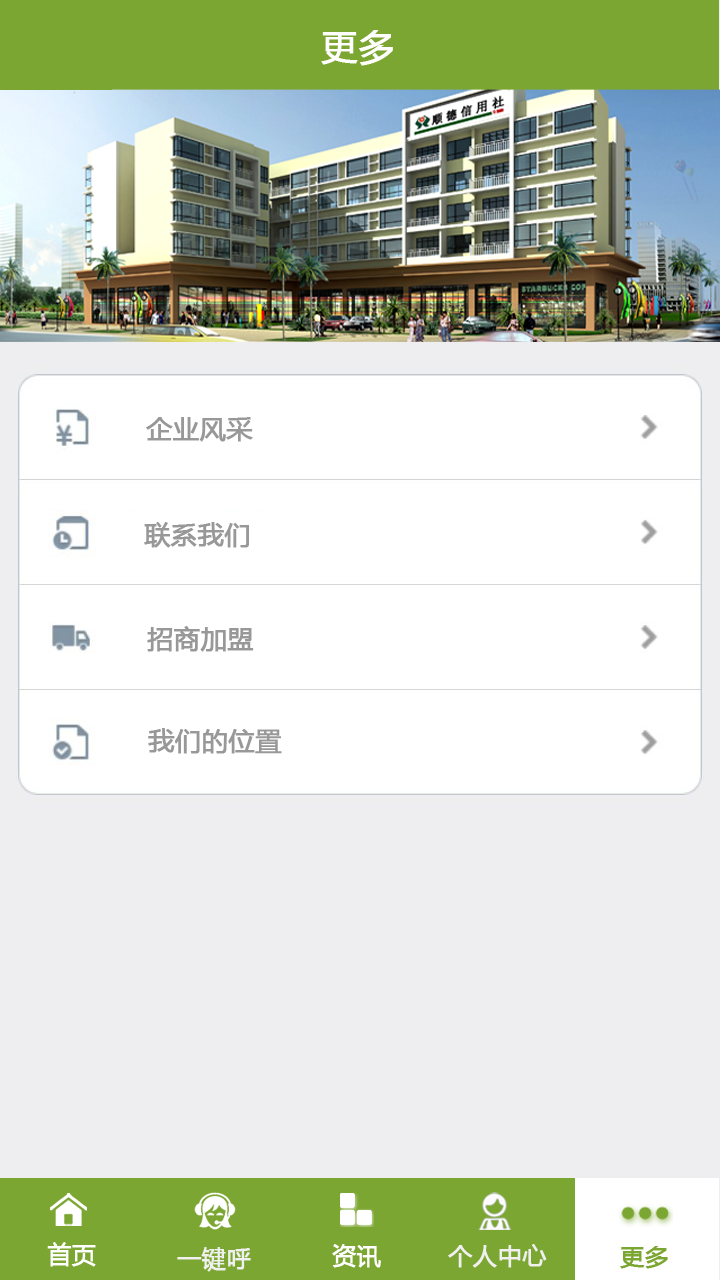
<style>
.page{position:relative;width:720px;height:1280px;background:#eeeef0}
.page>*{position:absolute;margin:0}
.t1{font:36px "MicrosoftYaHei";color:#ffffff;font-weight:bold}
.t2{font:26px "MicrosoftYaHei";color:#999898;font-weight:bold}
.t3{font:24px "MicrosoftYaHei";color:#ffffff;font-weight:bold}
.t4{font:24px "MicrosoftYaHei";color:#f0f0f0;font-weight:bold}
.t5{font:24px "MicrosoftYaHei";color:#7ca632;font-weight:bold}
</style>
<div class="page">
<p class="t1" style="left:321px;top:30px;width:72px;height:36px">更多</p>
<p class="t2" style="left:146px;top:417px;width:107px;height:25px">企业风采</p>
<p class="t2" style="left:144px;top:522px;width:105px;height:26px">联系我们</p>
<p class="t2" style="left:147px;top:626px;width:107px;height:26px">招商加盟</p>
<p class="t2" style="left:148px;top:728px;width:134px;height:26px">我们的位置</p>
<p class="t3" style="left:47px;top:1242px;width:49px;height:25px">首页</p>
<p class="t4" style="left:177px;top:1247px;width:74px;height:25px">一键呼</p>
<p class="t3" style="left:332px;top:1244px;width:49px;height:24px">资讯</p>
<p class="t4" style="left:448px;top:1244px;width:99px;height:24px">个人中心</p>
<p class="t5" style="left:620px;top:1246px;width:48px;height:23px">更多</p>
</div>
